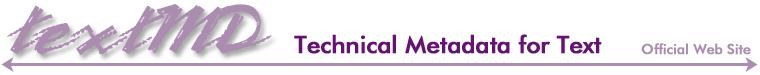
<style>
.page{position:relative;width:760px;height:75px;background:#ffffff}
.page>*{position:absolute;margin:0}
.t1{font:75px "BronxLetPlain";letter-spacing:-0.1em;color:#ab8db0}
.t2{font:24px "FuturaBT-Medium";letter-spacing:-0.02em;color:#641370;font-weight:bold}
.t3{font:14px "FuturaBT-Medium";letter-spacing:-0.02em;color:#ab8db0;font-weight:bold}
</style>
<div class="page">
<p class="t1" style="left:7px;top:4px;width:265px;height:51px">textMD</p>
<p class="t2" style="left:294px;top:34px;width:308px;height:20px">Technical Metadata for Text</p>
<p class="t3" style="left:641px;top:43px;width:110px;height:12px">Official Web Site</p>
</div>
